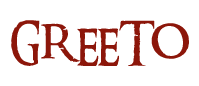
<style>
.page{position:relative;width:199px;height:86px;background:#ffffff}
.page>*{position:absolute;margin:0}
.t1{font:43px "RingbearerMedium";color:#8c160a}
</style>
<div class="page">
<p class="t1" style="left:11px;top:20px;width:178px;height:46px">GREETO</p>
</div>
